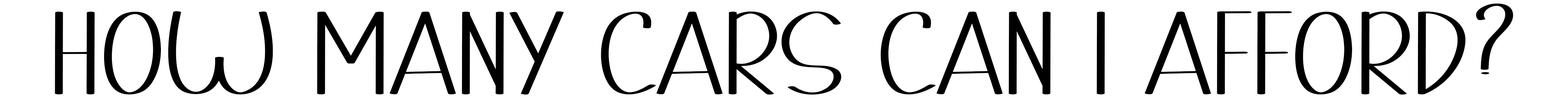
<style>
.page{position:relative;width:1568px;height:98px;background:#ffffff}
.page>*{position:absolute;margin:0}
.t1{font:172.4px "MinimalistRegular";color:#000000}
</style>
<div class="page">
<p class="t1" style="left:55px;top:4px;width:1458px;height:91px">HOW MANY CARS CAN I AFFORD?</p>
</div>
